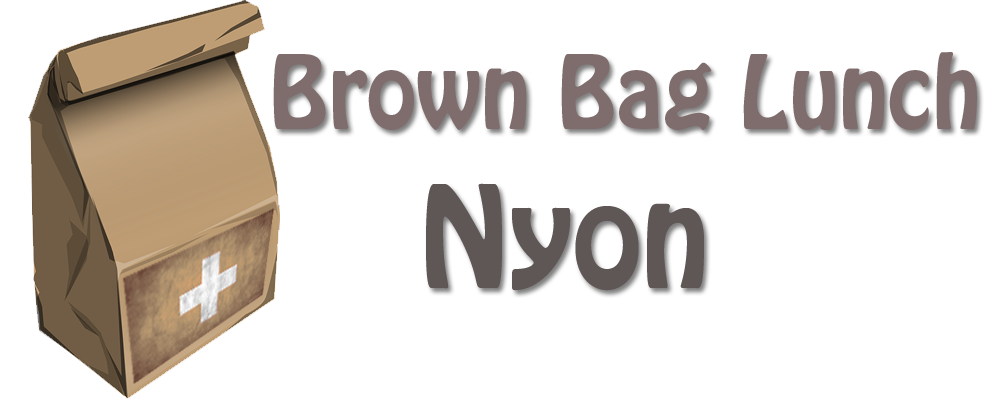
<style>
.page{position:relative;width:1000px;height:400px;background:#ffffff}
.page>*{position:absolute;margin:0}
.t1{font:90px "HoboStd";color:#7f6c6c}
.t2{font:125px "HoboStd";color:#5f5656}
</style>
<div class="page">
<p class="t1" style="left:273px;top:52px;width:704px;height:78px">Brown Bag Lunch</p>
<p class="t2" style="left:426px;top:183px;width:278px;height:108px">Nyon</p>
</div>
